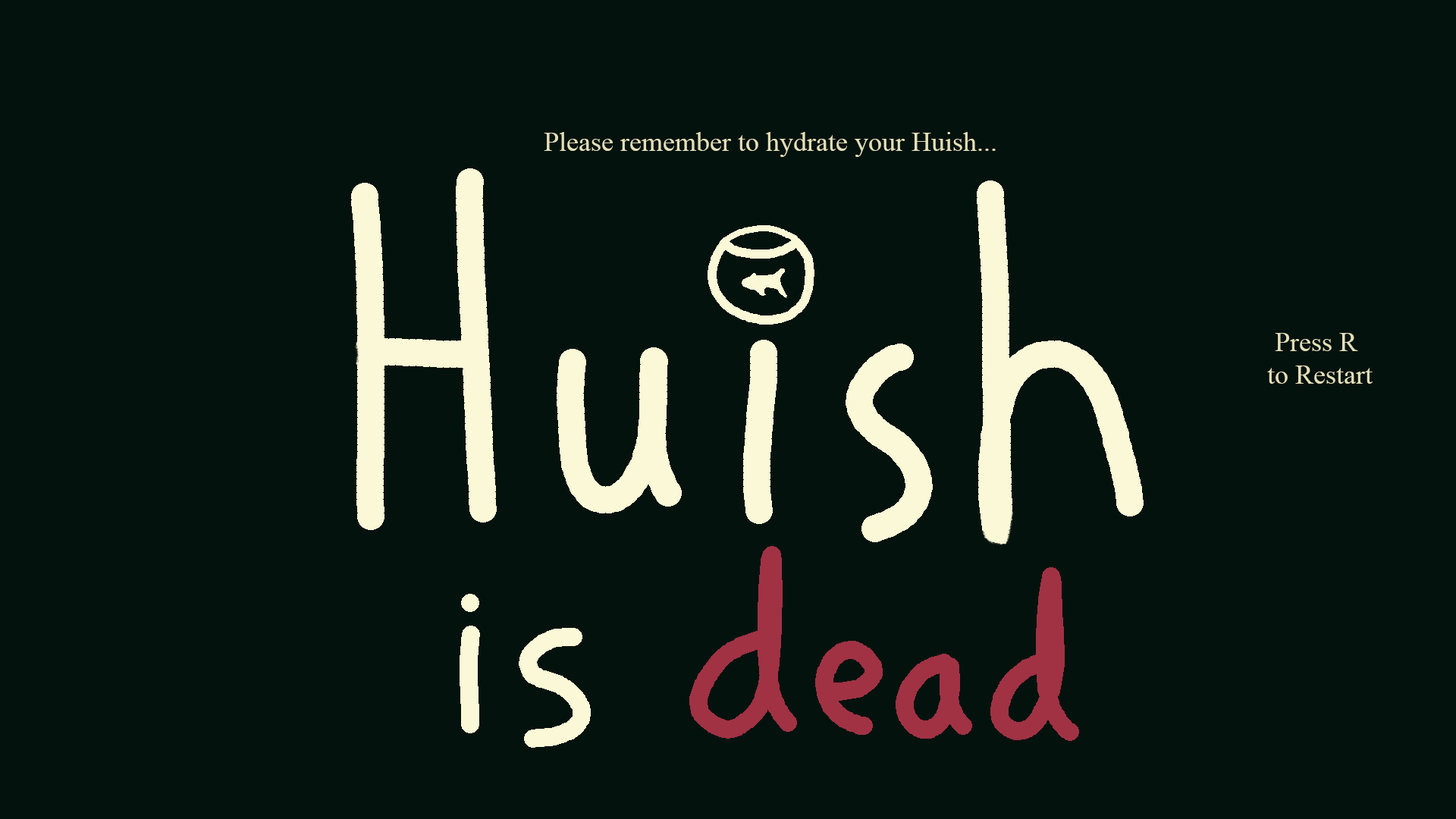
<style>
.page{position:relative;width:1456px;height:819px;background:#04120e}
.page>*{position:absolute;margin:0}
.t1{font:27.3px "TimesNewRomanPSMT";color:#e3dfb7}
</style>
<div class="page">
<p class="t1" style="left:544px;top:132px;width:452px;height:25px">Please remember to hydrate your Huish...</p>
<p class="t1" style="left:1267px;top:333px;width:106px;height:51px;text-align:center">Press R <br>to Restart</p>
</div>
